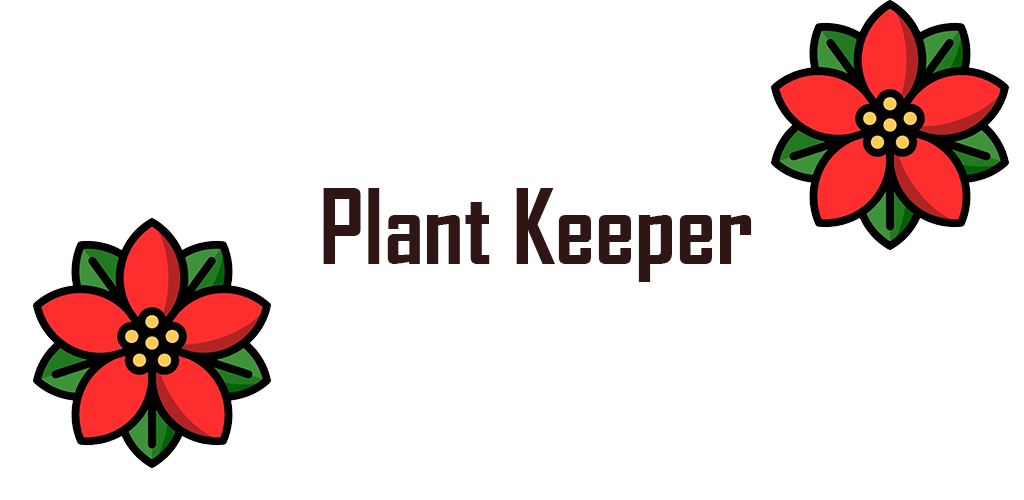
<style>
.page{position:relative;width:1024px;height:500px;background:#ffffff}
.page>*{position:absolute;margin:0}
.t1{font:100px "AgencyFB-Bold";color:#301515}
</style>
<div class="page">
<p class="t1" style="left:323px;top:188px;width:429px;height:94px">Plant Keeper</p>
</div>
